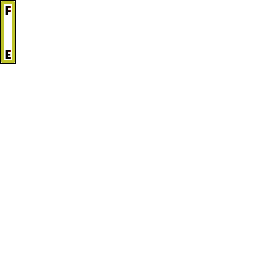
<style>
.page{position:relative;width:256px;height:256px;background:#ffffff}
.page>*{position:absolute;margin:0}
.t1{font:12px "LithosPro-Black";color:#010100}
.t2{font:12px "LithosPro-Black";color:#000000}
</style>
<div class="page">
<p class="t1" style="left:5px;top:6px;width:6px;height:9px">F</p>
<p class="t2" style="left:5px;top:50px;width:6px;height:9px">E</p>
</div>
